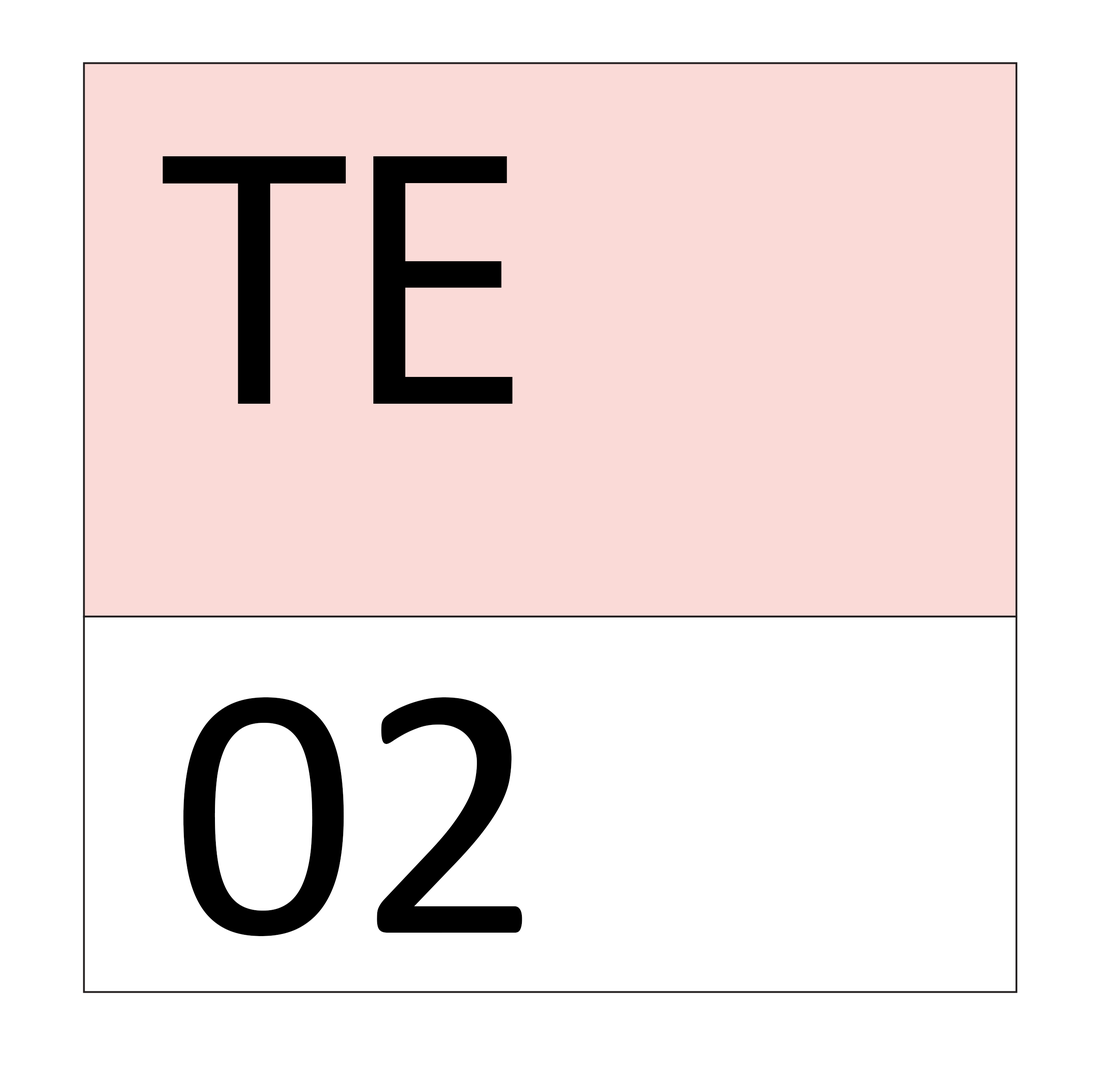
<style>
.page{position:relative;width:1108px;height:1076px;background:#ffffff}
.page>*{position:absolute;margin:0}
.t1{font:367px "MyriadPro-Regular";color:#000000}
.t2{font:367px "Calibri";color:#000000}
</style>
<div class="page">
<p class="t1" style="left:163px;top:156px;width:350px;height:248px">TE</p>
<p class="t2" style="left:183px;top:697px;width:339px;height:239px">02</p>
</div>
